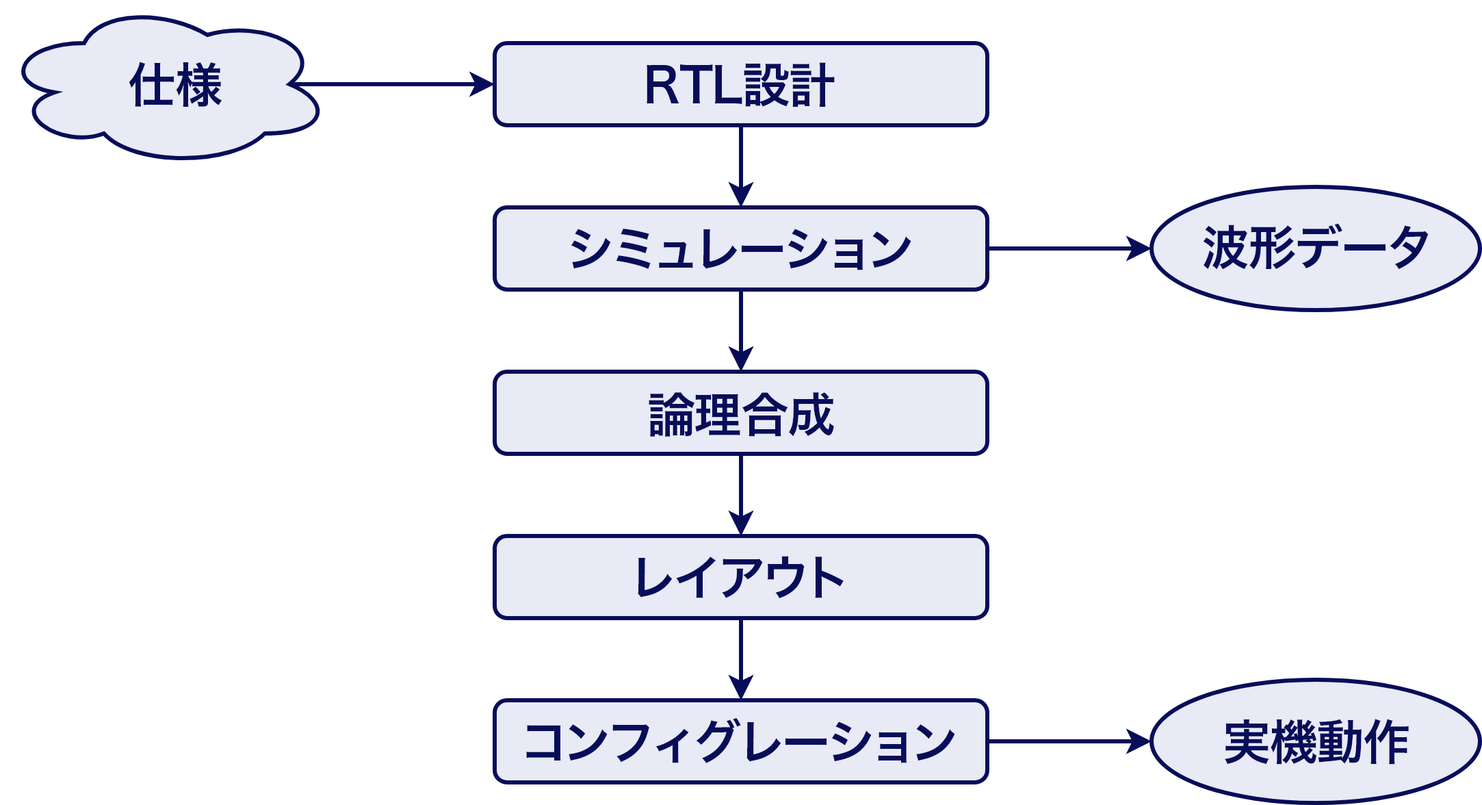
<style>
.page{position:relative;width:1482px;height:805px;background:#ffffff}
.page>*{position:absolute;margin:0}
.t1{font:47.9px "HiraKakuProN-W6";color:#070d59}
</style>
<div class="page">
<p class="t1" style="left:129px;top:62px;width:93px;height:45px">仕様</p>
<p class="t1" style="left:647px;top:62px;width:188px;height:45px">RTL設計</p>
<p class="t1" style="left:571px;top:229px;width:340px;height:41px">シミュレーション</p>
<p class="t1" style="left:1203px;top:223px;width:226px;height:47px">波形データ</p>
<p class="t1" style="left:649px;top:392px;width:185px;height:45px">論理合成</p>
<p class="t1" style="left:638px;top:556px;width:206px;height:42px">レイアウト</p>
<p class="t1" style="left:526px;top:718px;width:429px;height:45px">コンフィグレーション</p>
<p class="t1" style="left:1225px;top:718px;width:184px;height:46px">実機動作</p>
</div>
